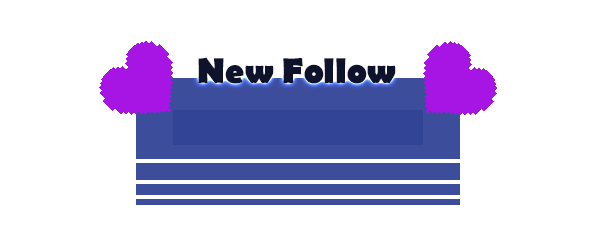
<style>
.page{position:relative;width:597px;height:246px;background:#ffffff}
.page>*{position:absolute;margin:0}
.t1{font:36px "BerlinSansFB-Bold";color:#0e132b}
</style>
<div class="page">
<p class="t1" style="left:198px;top:57px;width:198px;height:27px">New Follow</p>
</div>
